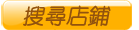
<style>
.page{position:relative;width:139px;height:30px;background:#ffb100}
.page>*{position:absolute;margin:0}
.t1{font:21px "FZY1K--GBK1-0";color:#93530d;font-weight:bold;font-style:italic}
</style>
<div class="page">
<p class="t1" style="left:23px;top:5px;width:88px;height:22px">搜尋店鋪</p>
</div>
